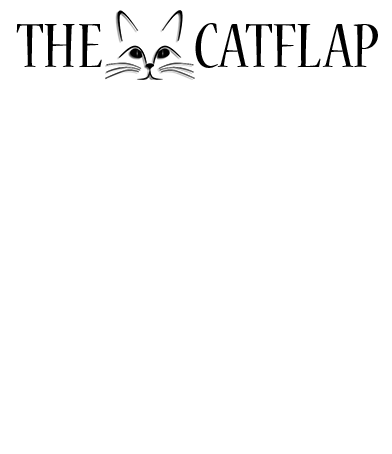
<style>
.page{position:relative;width:392px;height:454px;background:#ffffff}
.page>*{position:absolute;margin:0}
.t1{font:70px "NuevaStd-Cond";color:#000000}
</style>
<div class="page">
<p class="t1" style="left:16px;top:23px;width:362px;height:45px">THE          CATFLAP</p>
</div>
